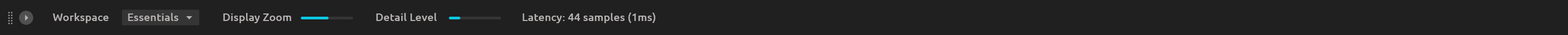
<style>
.page{position:relative;width:1568px;height:35px;background:#202020}
.page>*{position:absolute;margin:0}
.t1{font:10.9px "Ubuntu-Medium";letter-spacing:0.01em;color:#b5b2b1}
</style>
<div class="page">
<p class="t1" style="left:53px;top:13px;width:56px;height:10px">Workspace</p>
<p class="t1" style="left:128px;top:13px;width:51px;height:8px">Essentials</p>
<p class="t1" style="left:223px;top:13px;width:68px;height:10px">Display Zoom</p>
<p class="t1" style="left:376px;top:13px;width:61px;height:8px">Detail Level</p>
<p class="t1" style="left:523px;top:13px;width:133px;height:10px">Latency: 44 samples (1ms)</p>
</div>
